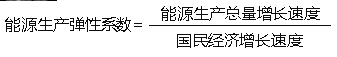
<style>
.page{position:relative;width:337px;height:57px;background:#ffffff}
.page>*{position:absolute;margin:0}
.t1{font:16px "MicrosoftYaHei";letter-spacing:-0.005em;color:#0d0d0d}
</style>
<div class="page">
<p class="t1" style="left:161px;top:6px;width:159px;height:15px">能源生产总量增长速度</p>
<p class="t1" style="left:5px;top:17px;width:137px;height:15px">能源生产弹性系数=</p>
<p class="t1" style="left:177px;top:33px;width:126px;height:15px">国民经济增长速度</p>
</div>
